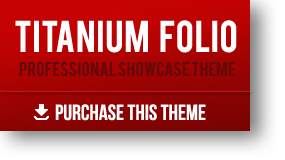
<style>
.page{position:relative;width:285px;height:160px}
.page>*{position:absolute;margin:0}
.t1{font:35px "Bebas";color:#ffffff}
.t2{font:16px "Bebas";color:#650808}
.t3{font:22px "BebasNeue";color:#ffffff}
</style>
<div class="page">
<p class="t1" style="left:15px;top:20px;width:222px;height:33px">titanium   folio</p>
<p class="t2" style="left:19px;top:62px;width:216px;height:14px">professional showcase theme</p>
<p class="t3" style="left:55px;top:104px;width:151px;height:17px">purchase this theme</p>
</div>
